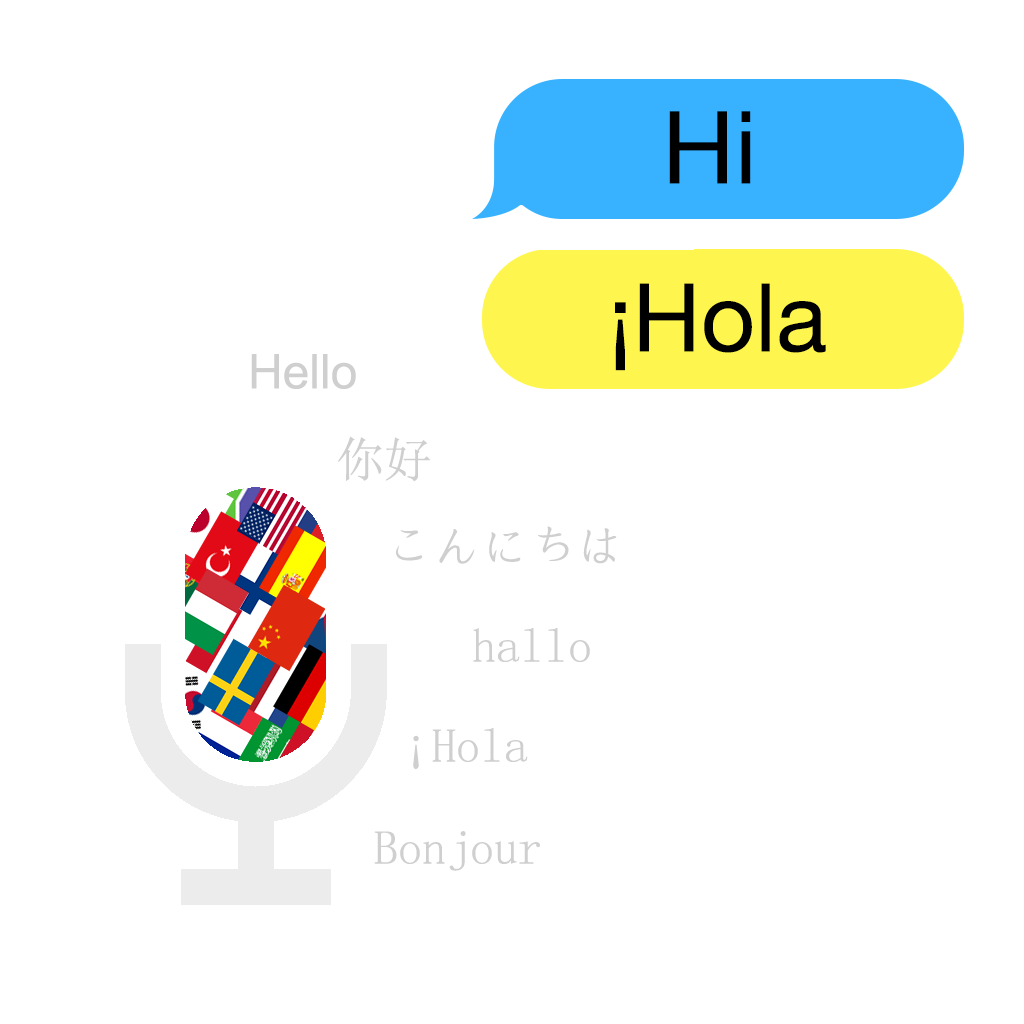
<style>
.page{position:relative;width:1024px;height:1024px;background:#ffffff}
.page>*{position:absolute;margin:0}
.t1{font:100.9px "HelveticaNeue";color:#000000}
.t2{font:94.9px "HelveticaNeue";color:#000000}
.t3{font:48px "ArialMT";color:#d0cfcf}
.t4{font:48px "SimSun";color:#d0cfcf}
</style>
<div class="page">
<p class="t1" style="left:669px;top:111px;width:82px;height:73px">Hi</p>
<p class="t2" style="left:615px;top:283px;width:211px;height:88px">¡Hola</p>
<p class="t3" style="left:251px;top:354px;width:105px;height:35px">Hello</p>
<p class="t4" style="left:338px;top:436px;width:93px;height:46px">你好</p>
<p class="t4" style="left:396px;top:526px;width:221px;height:38px">こんにちは</p>
<p class="t4" style="left:473px;top:628px;width:117px;height:34px">hallo</p>
<p class="t4" style="left:413px;top:728px;width:115px;height:42px">¡Hola</p>
<p class="t4" style="left:374px;top:831px;width:166px;height:40px">Bonjour</p>
</div>
